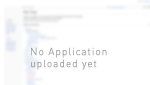
<style>
.page{position:relative;width:150px;height:85px;background:#ffffff}
.page>*{position:absolute;margin:0}
.t1{font:10px/12px "DIN-Light";letter-spacing:0.075em;color:#9e9e9e;font-weight:bold}
</style>
<div class="page">
<p class="t1" style="left:31px;top:47px;width:76px;height:23px">No Application<br>uploaded yet</p>
</div>
